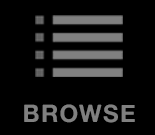
<style>
.page{position:relative;width:155px;height:135px;background:#000000}
.page>*{position:absolute;margin:0}
.t1{font:24px "AlteHaasGrotesk_Bold";letter-spacing:0.05em;color:#808080}
</style>
<div class="page">
<p class="t1" style="left:24px;top:104px;width:111px;height:19px">BROWSE</p>
</div>
